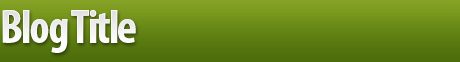
<style>
.page{position:relative;width:460px;height:62px}
.page>*{position:absolute;margin:0}
.t1{font:48px "MyriadPro-BoldCond";letter-spacing:-0.05em;color:#ffffff}
</style>
<div class="page">
<p class="t1" style="left:2px;top:10px;width:134px;height:43px">Blog Title</p>
</div>
